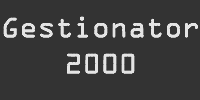
<style>
.page{position:relative;width:200px;height:100px;background:#333333}
.page>*{position:absolute;margin:0}
.t1{font:30px "OCRAExtended";color:#e4e4e4}
</style>
<div class="page">
<p class="t1" style="left:3px;top:16px;width:195px;height:58px;text-align:center">Gestionator<br>2000</p>
</div>
